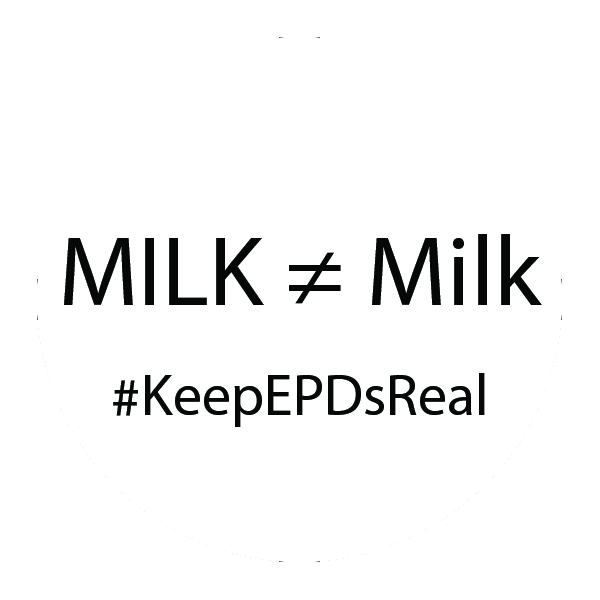
<style>
.page{position:relative;width:600px;height:600px;background:#ffffff}
.page>*{position:absolute;margin:0}
.t1{font:100px "MyriadPro-Regular";color:#060808}
.t2{font:58.3px "MyriadPro-Regular";color:#060808}
</style>
<div class="page">
<p class="t1" style="left:64px;top:234px;width:478px;height:71px">MILK ≠ Milk</p>
<p class="t2" style="left:113px;top:373px;width:372px;height:54px">#KeepEPDsReal</p>
</div>
